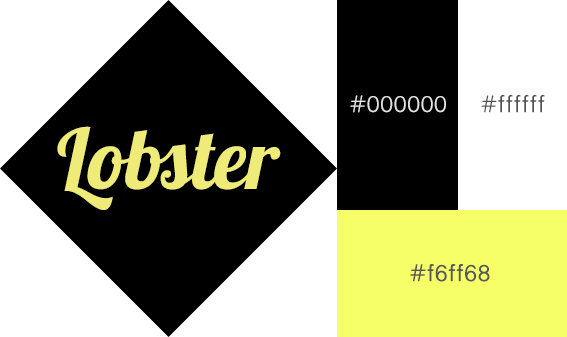
<style>
.page{position:relative;width:567px;height:337px;background:#ffffff}
.page>*{position:absolute;margin:0}
.t1{font:24px "MalayalamSangamMN";color:#e3e3e3}
.t2{font:24px "MalayalamSangamMN";color:#4e4e4e}
.t3{font:84px "Lobster-Regular";color:#fffb82}
.t4{font:24px "MalayalamSangamMN";color:#575757}
</style>
<div class="page">
<p class="t1" style="left:350px;top:95px;width:96px;height:18px">#000000</p>
<p class="t2" style="left:481px;top:95px;width:64px;height:18px">#ffffff</p>
<p class="t3" style="left:57px;top:126px;width:224px;height:84px;opacity:0.9">Lobster</p>
<p class="t4" style="left:410px;top:264px;width:80px;height:18px">#f6ff68</p>
</div>
